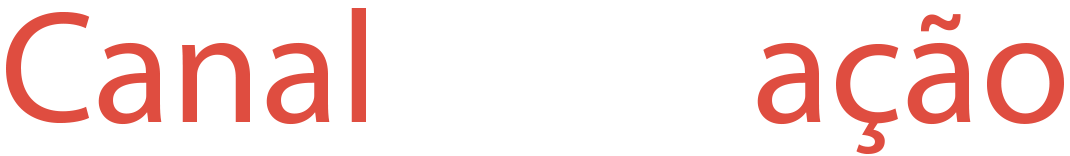
<style>
.page{position:relative;width:1070px;height:156px;background:#ffffff}
.page>*{position:absolute;margin:0}
.t1{font:160px "MyriadPro-Regular";color:#df4d40}
.t2{font:160px "MyriadPro-Regular";color:#ffffff}
</style>
<div class="page">
<p class="t1" style="left:6px;top:8px;width:1058px;height:146px">Canal<span class="t2"> Read</span>ação</p>
</div>
